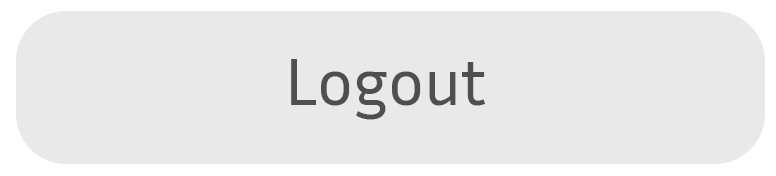
<style>
.page{position:relative;width:776px;height:176px;background:#e9e9e9}
.page>*{position:absolute;margin:0}
.t1{font:66.7px "InriaSans-Regular";color:#4f4f4f}
</style>
<div class="page">
<p class="t1" style="left:291px;top:59px;width:195px;height:61px">Logout</p>
</div>
